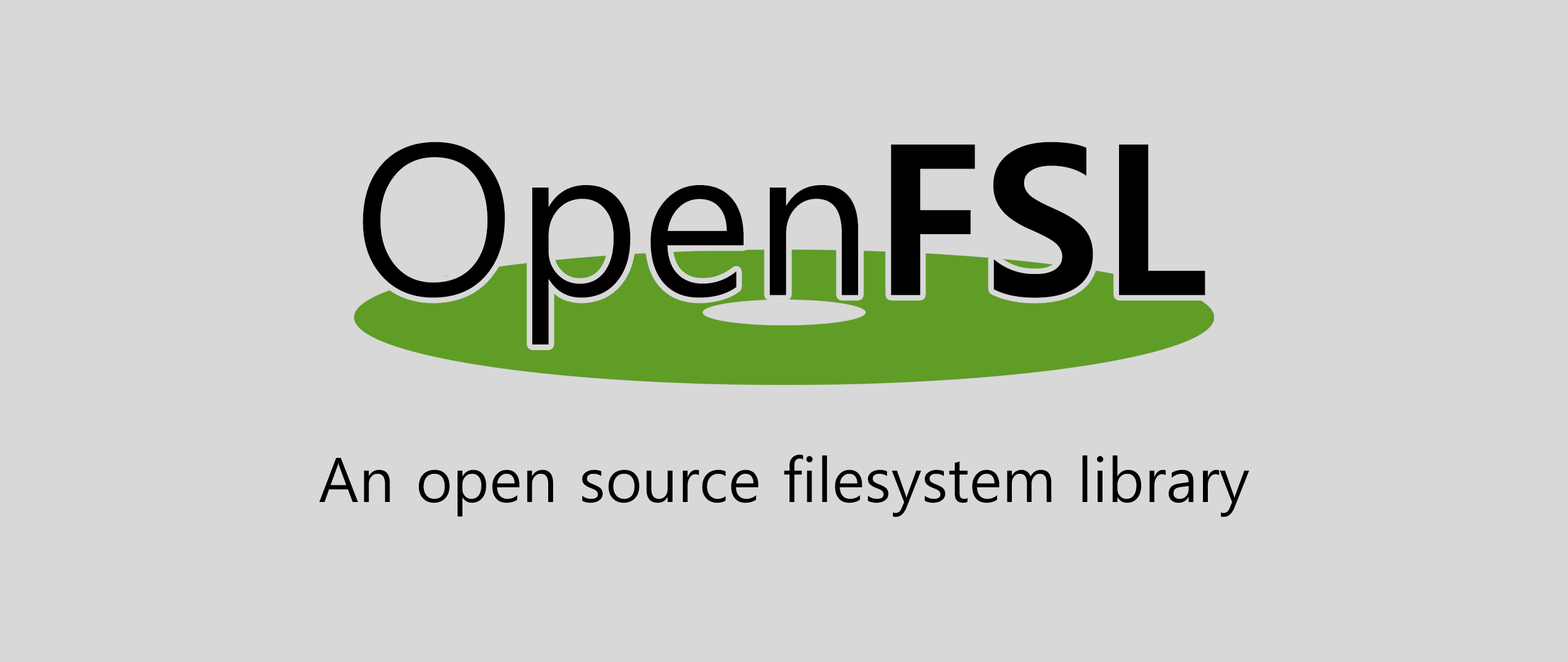
<style>
.page{position:relative;width:1568px;height:662px;background:#d8d8d8}
.page>*{position:absolute;margin:0}
.t1{font:209.1px "MalgunGothic";color:#000000}
.t2{font:209.1px "MalgunGothicBold";color:#000000}
.t3{font:61.3px "MalgunGothic";color:#000000}
</style>
<div class="page">
<p class="t1" style="left:363px;top:141px;width:842px;height:203px">Open<span class="t2">FSL</span></p>
<p class="t3" style="left:319px;top:454px;width:931px;height:63px">An open source filesystem library</p>
</div>
